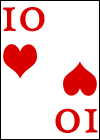
<style>
.page{position:relative;width:100px;height:140px;background:#ffffff}
.page>*{position:absolute;margin:0}
.t1{font:60px "HighTowerText-Reg";color:#da0000}
</style>
<div class="page">
<p class="t1" style="left:3px;top:7px;width:42px;height:25px">10</p>
<p class="t1" style="left:55px;top:108px;width:43px;height:25px;rotate:180deg">10</p>
</div>
